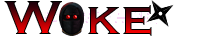
<style>
.page{position:relative;width:199px;height:36px;background:#ffffff}
.page>*{position:absolute;margin:0}
.t1{font:49.8px "CopperplateGothic-Bold"}
</style>
<div class="page">
<p class="t1" style="left:4px;top:1px;width:148px;height:35px">W  ke</p>
</div>
